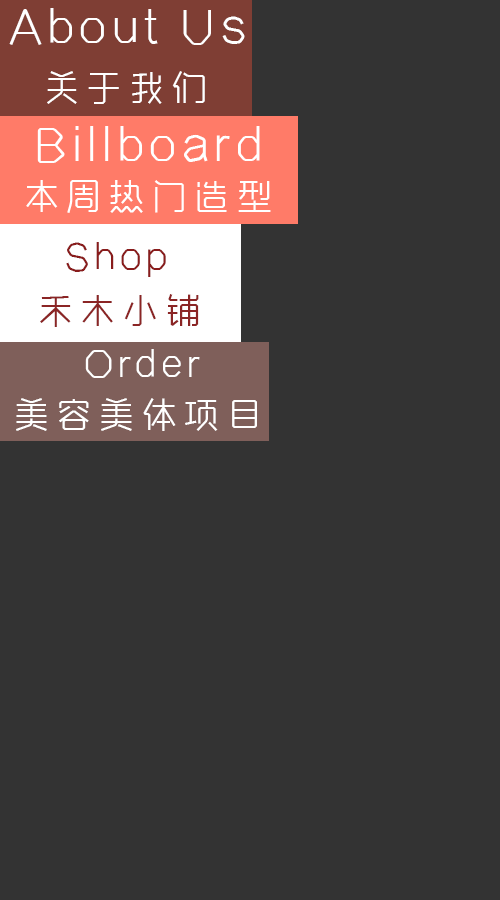
<style>
.page{position:relative;width:500px;height:900px;background:#333333}
.page>*{position:absolute;margin:0}
.t1{font:45px "ZQKZYT";letter-spacing:0.1em;color:#ffffff}
.t2{font:35px "ZQKZYT";letter-spacing:0.22em;color:#ffffff}
.t3{font:36px "ZQKZYT";letter-spacing:0.1em;color:#891c1c}
.t4{font:35px "ZQKZYT";letter-spacing:0.22em;color:#8b2525}
.t5{font:36px "ZQKZYT";letter-spacing:0.1em;color:#ffffff}
</style>
<div class="page">
<p class="t1" style="left:9px;top:8px;width:236px;height:37px">About Us</p>
<p class="t2" style="left:47px;top:71px;width:158px;height:33px">关于我们</p>
<p class="t1" style="left:37px;top:126px;width:223px;height:37px">Billboard</p>
<p class="t2" style="left:26px;top:180px;width:245px;height:33px">本周热门造型</p>
<p class="t3" style="left:66px;top:242px;width:100px;height:35px">Shop</p>
<p class="t4" style="left:40px;top:294px;width:159px;height:33px">禾木小铺</p>
<p class="t5" style="left:85px;top:349px;width:115px;height:29px">Order</p>
<p class="t2" style="left:16px;top:398px;width:241px;height:33px">美容美体项目</p>
</div>
